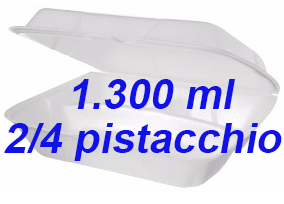
<style>
.page{position:relative;width:284px;height:204px;background:#fefefe}
.page>*{position:absolute;margin:0}
.t1{font:72px "Arial-BoldMT";color:#1111ea;font-style:italic}
</style>
<div class="page">
<p class="t1" style="left:73px;top:79px;width:162px;height:30px">1.300 ml</p>
<p class="t1" style="left:4px;top:123px;width:278px;height:38px">2/4 pistacchio</p>
</div>
